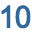
<style>
.page{position:relative;width:32px;height:32px;background:#ffffff}
.page>*{position:absolute;margin:0}
.t1{font:30px "ArialMT";letter-spacing:-0.035em;color:#336699;font-weight:bold}
</style>
<div class="page">
<p class="t1" style="left:1px;top:5px;width:30px;height:24px">10</p>
</div>
